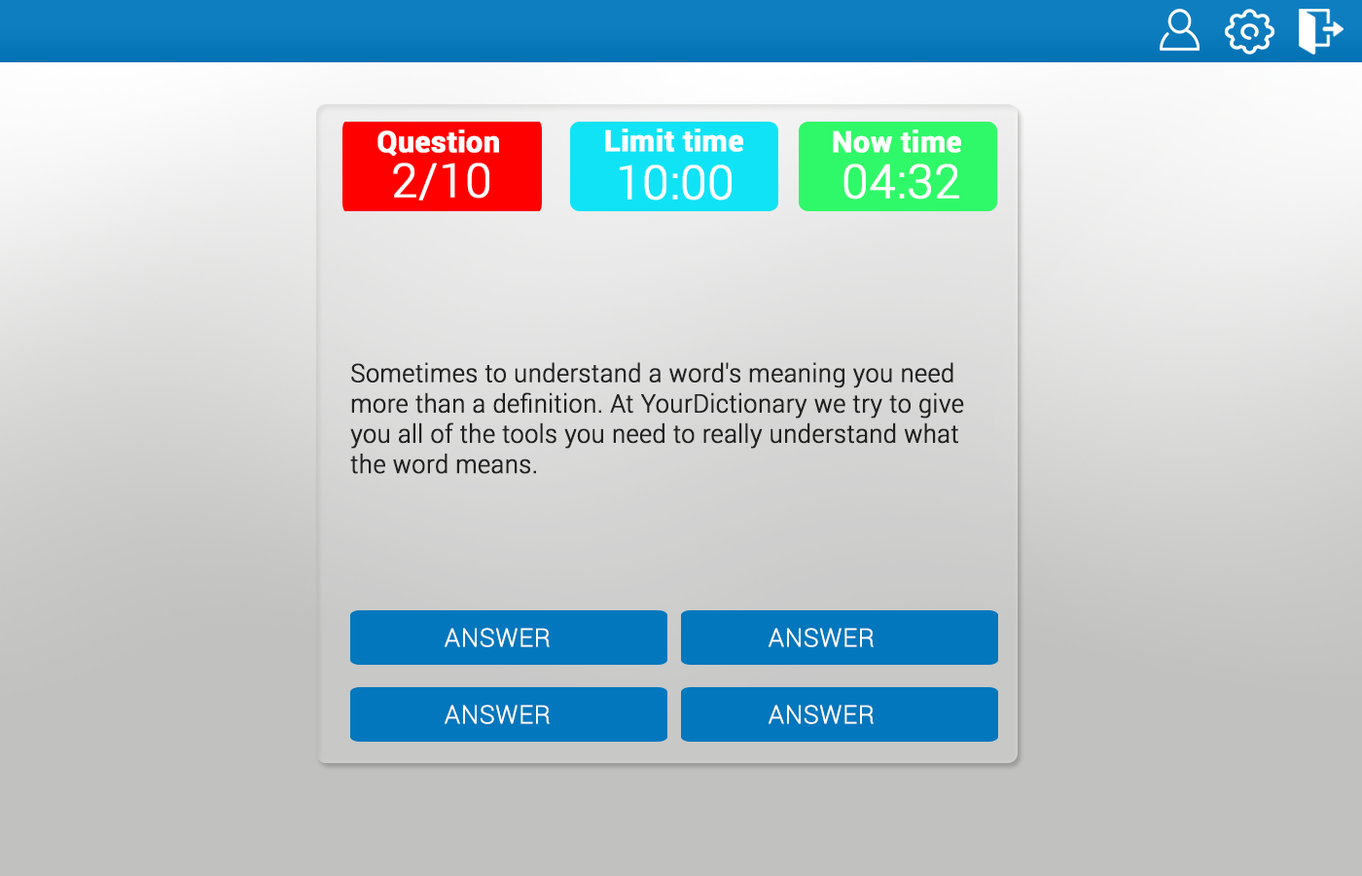
<style>
.page{position:relative;width:1362px;height:876px}
.page>*{position:absolute;margin:0}
.t1{font:29.2px "Roboto-Bold";color:#ffffff;font-weight:bold}
.t2{font:46.7px "Roboto-Light";color:#ffffff;font-weight:bold}
.t3{font:25.3px "Roboto-Light";color:#212121;font-weight:bold;scale:0.96 1}
.t4{font:25.3px "Roboto-Light";color:#ffffff;font-weight:bold}
</style>
<div class="page">
<p class="t1" style="left:377px;top:129px;width:122px;height:27px">Question</p>
<p class="t1" style="left:605px;top:128px;width:138px;height:24px">Limit time</p>
<p class="t1" style="left:833px;top:129px;width:128px;height:24px">Now time</p>
<p class="t2" style="left:393px;top:162px;width:96px;height:38px">2/10</p>
<p class="t2" style="left:620px;top:164px;width:112px;height:36px">10:00</p>
<p class="t2" style="left:843px;top:163px;width:116px;height:36px">04:32</p>
<p class="t3" style="left:350px;top:362px;width:614px;height:112px">Sometimes to understand a word's meaning you need more than a definition. At YourDictionary we try to give you all of the tools you need to really understand what the word means.</p>
<p class="t4" style="left:445px;top:627px;width:105px;height:20px">ANSWER</p>
<p class="t4" style="left:769px;top:627px;width:105px;height:20px">ANSWER</p>
<p class="t4" style="left:445px;top:704px;width:105px;height:20px">ANSWER</p>
<p class="t4" style="left:769px;top:704px;width:105px;height:20px">ANSWER</p>
</div>
